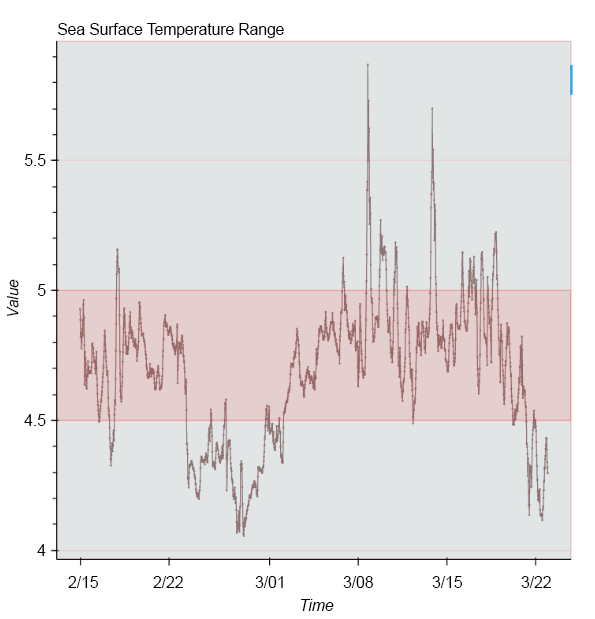
<style>
.page{position:relative;width:595px;height:619px;background:#e2e5e5}
.page>*{position:absolute;margin:0}
.t1{font:26.7px "ArialMT";color:#000000}
.t2{font:26.7px "Arial-ItalicMT";color:#000000}
</style>
<div class="page">
<p class="t1" style="left:58px;top:23px;width:226px;height:15px">Sea Surface Temperature Range</p>
<p class="t1" style="left:25px;top:154px;width:21px;height:12px">5.5</p>
<p class="t2" style="left:6px;top:279px;width:13px;height:37px;rotate:-90deg">Value</p>
<p class="t1" style="left:38px;top:284px;width:8px;height:12px">5</p>
<p class="t1" style="left:24px;top:414px;width:22px;height:12px">4.5</p>
<p class="t1" style="left:37px;top:544px;width:9px;height:12px">4</p>
<p class="t1" style="left:68px;top:576px;width:30px;height:12px">2/15</p>
<p class="t1" style="left:153px;top:576px;width:30px;height:12px">2/22</p>
<p class="t1" style="left:255px;top:576px;width:28px;height:12px">3/01</p>
<p class="t1" style="left:343px;top:576px;width:30px;height:12px">3/08</p>
<p class="t1" style="left:432px;top:576px;width:30px;height:12px">3/15</p>
<p class="t1" style="left:521px;top:576px;width:30px;height:12px">3/22</p>
<p class="t2" style="left:301px;top:599px;width:33px;height:12px">Time</p>
</div>
